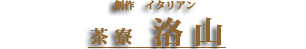
<style>
.page{position:relative;width:306px;height:49px;background:#ffffff}
.page>*{position:absolute;margin:0}
.t1{font:10px "KozMinPro-Bold";color:#906530;font-weight:bold}
.t2{font:18px "KozMinPro-Bold";color:#906530;font-weight:bold}
.t3{font:30px "KozMinPro-Bold";color:#906530;font-weight:bold}
</style>
<div class="page">
<p class="t1" style="left:114px;top:0px;width:82px;height:11px">創作　イタリアン</p>
<p class="t2" style="left:90px;top:17px;width:133px;height:30px">茶 寮　<span class="t3">洛 山</span></p>
</div>
